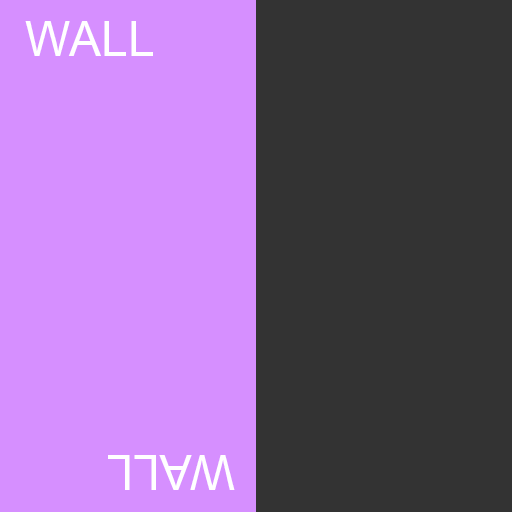
<style>
.page{position:relative;width:512px;height:512px;background:#333333}
.page>*{position:absolute;margin:0}
.t1{font:48px "ArialMT";color:#ffffff}
.t2{font:48.2px "ArialMT";color:#ffffff}
</style>
<div class="page">
<p class="t1" style="left:25px;top:21px;width:128px;height:35px">WALL</p>
<p class="t2" style="left:108px;top:455px;width:127px;height:35px;rotate:180deg">WALL</p>
</div>
